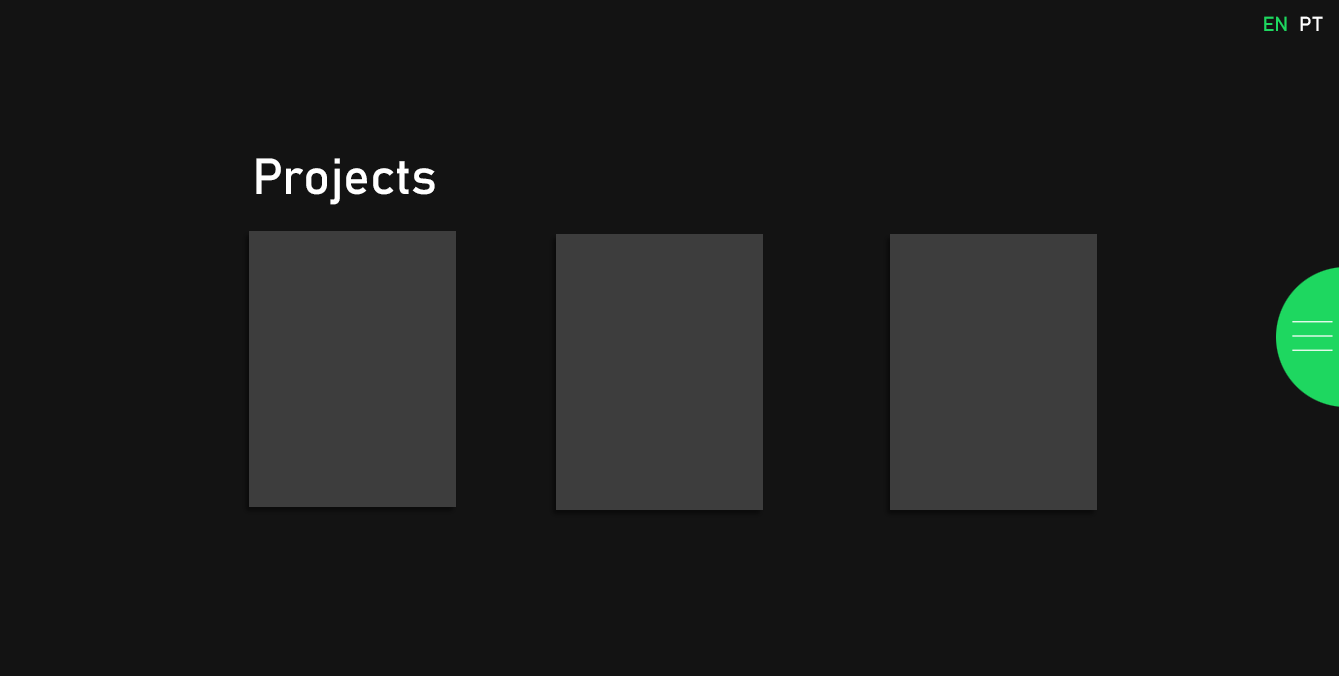
<style>
.page{position:relative;width:1339px;height:676px;background:#131313}
.page>*{position:absolute;margin:0}
.t1{font:20px "Bahnschrift";color:#1ed760}
.t2{font:20px "Bahnschrift";color:#ffffff}
.t3{font:50px "Bahnschrift";color:#ffffff}
</style>
<div class="page">
<p class="t1" style="left:1264px;top:16px;width:59px;height:15px">EN  <span class="t2">PT</span></p>
<p class="t3" style="left:256px;top:158px;width:179px;height:47px">Projects</p>
</div>
